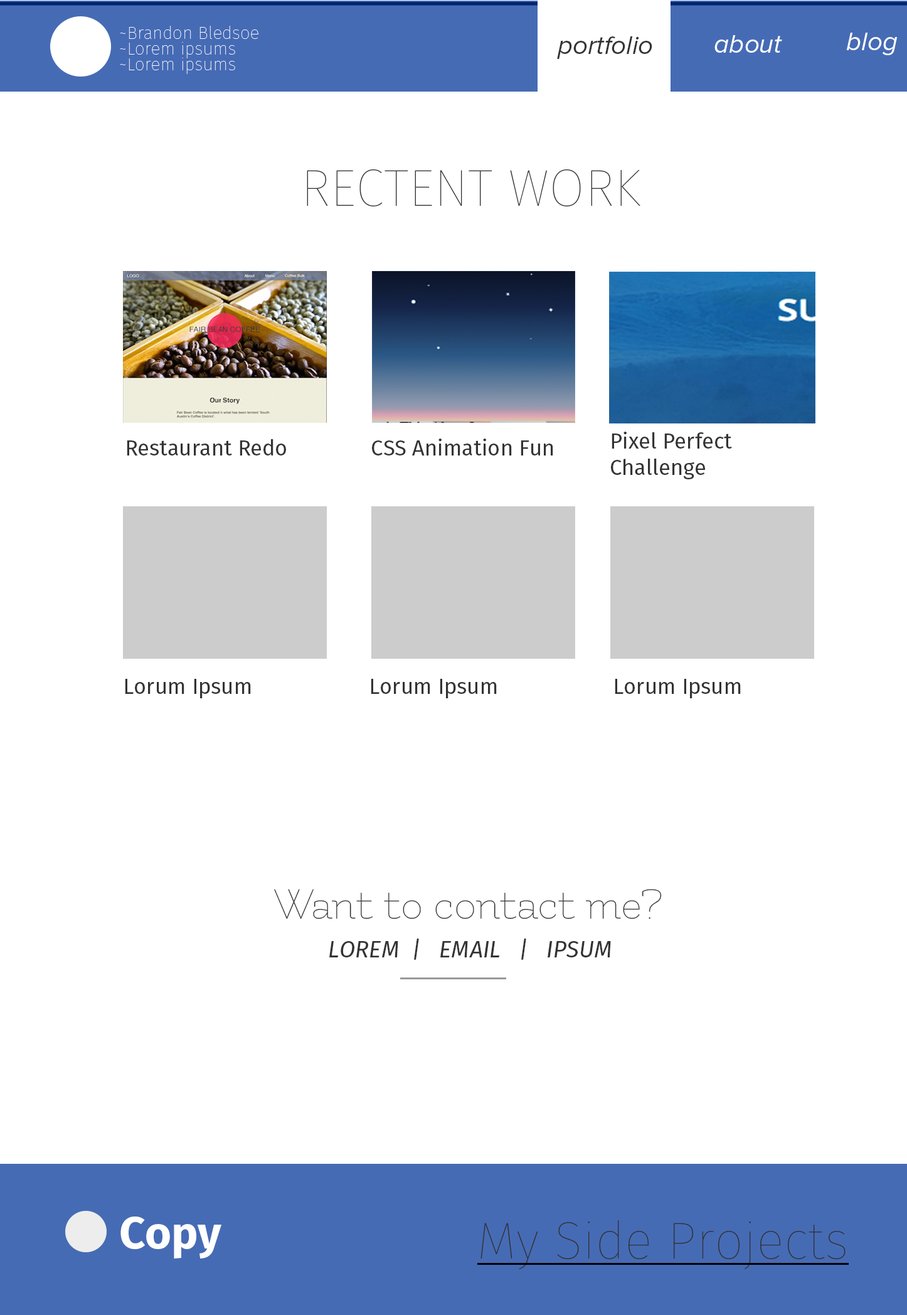
<style>
.page{position:relative;width:907px;height:1315px;background:#ffffff}
.page>*{position:absolute;margin:0}
.t1{font:17.6px "FiraSans-Hair";color:#ffffff}
.t2{font:26.2px "ProximaNova-RegularIt";color:#333333}
.t3{font:26.2px "ProximaNova-RegularIt";color:#ffffff}
.t4{font:52px "FiraSans-Hair";color:#31312f}
.t5{font:21.7px "FiraSans-Regular";color:#333333}
.t6{font:47.7px "Flamenco-Light";color:#31312f}
.t7{font:23.2px "FiraSans-Italic";color:#333333}
.t8{font:45.2px "FiraSans-Bold";color:#ffffff}
.t9{font:51.7px "FiraSans-Hair";color:#31312f}
</style>
<div class="page">
<p class="t1" style="left:120px;top:26px;width:138px;height:13px">~Brandon Bledsoe</p>
<p class="t2" style="left:557px;top:36px;width:95px;height:23px">portfolio</p>
<p class="t3" style="left:714px;top:35px;width:68px;height:18px">about</p>
<p class="t3" style="left:846px;top:33px;width:52px;height:22px">blog</p>
<p class="t1" style="left:120px;top:42px;width:115px;height:16px">~Lorem ipsums</p>
<p class="t1" style="left:120px;top:58px;width:115px;height:16px">~Lorem ipsums</p>
<p class="t4" style="left:307px;top:169px;width:333px;height:37px">RECTENT WORK</p>
<p class="t5" style="left:611px;top:432px;width:121px;height:47px">Pixel Perfect <br>Challenge</p>
<p class="t5" style="left:127px;top:439px;width:159px;height:16px">Restaurant Redo</p>
<p class="t5" style="left:372px;top:438px;width:181px;height:17px">CSS Animation Fun</p>
<p class="t5" style="left:125px;top:679px;width:126px;height:19px">Lorum Ipsum</p>
<p class="t5" style="left:371px;top:679px;width:126px;height:19px">Lorum Ipsum</p>
<p class="t5" style="left:615px;top:679px;width:126px;height:19px">Lorum Ipsum</p>
<p class="t6" style="left:274px;top:889px;width:388px;height:30px">Want to contact me?</p>
<p class="t7" style="left:329px;top:938px;width:282px;height:22px">LOREM  |   EMAIL   |   IPSUM</p>
<p class="t8" style="left:120px;top:1216px;width:101px;height:42px">Copy</p>
<p class="t9" style="left:480px;top:1220px;width:366px;height:49px">My Side Projects</p>
</div>
